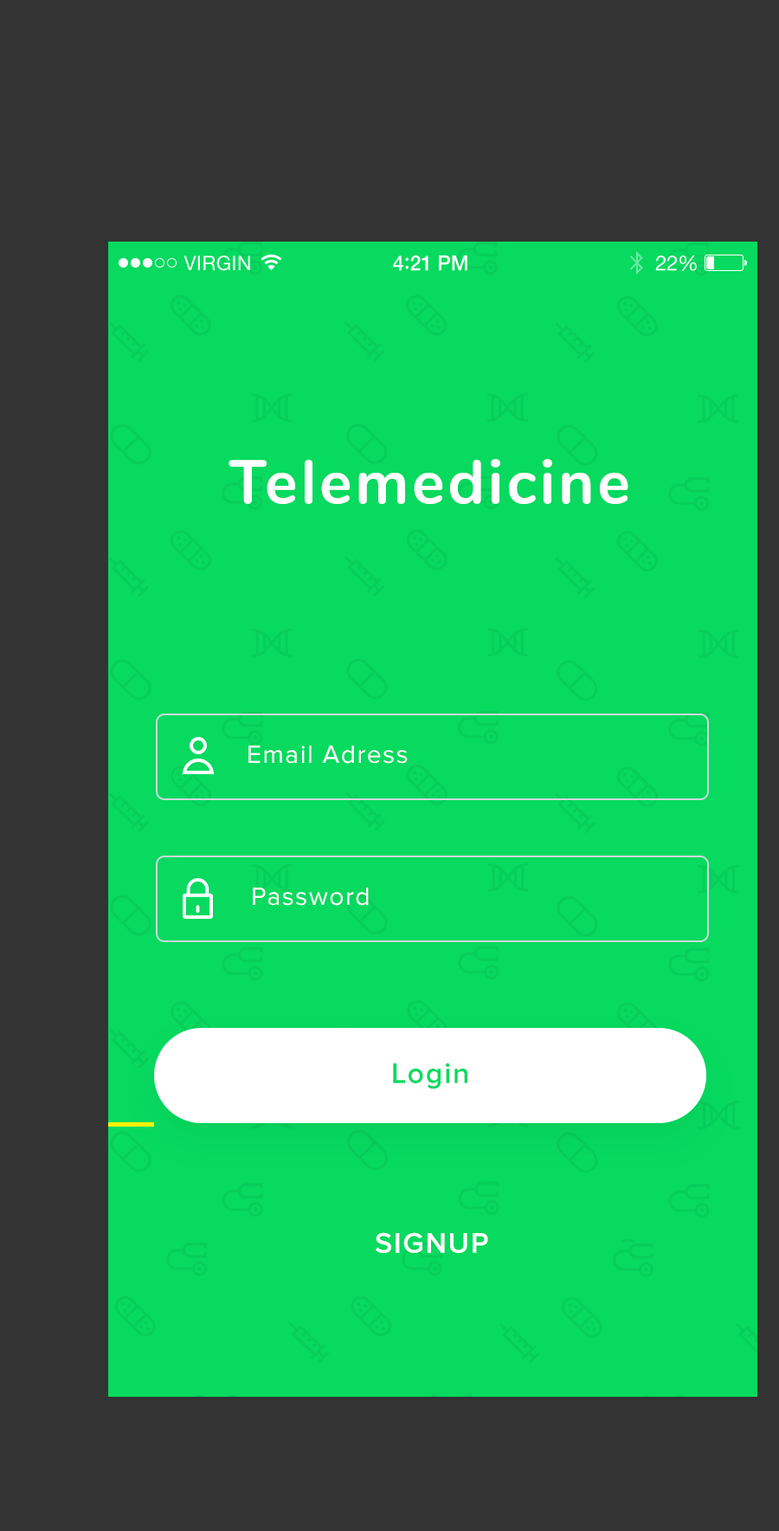
<style>
.page{position:relative;width:779px;height:1531px;background:#07da5f}
.page>*{position:absolute;margin:0}
.t1{font:61.6px "Nunito-Bold";letter-spacing:0.05em;color:#ffffff}
.t2{font:26px "ProximaNova-Regular";letter-spacing:0.05em;color:#ffffff}
.t3{font:29.4px "ProximaNova-Semibold";letter-spacing:0.05em;color:#07da5f}
.t4{font:29.4px "ProximaNova-Semibold";letter-spacing:0.05em;color:#ffffff}
</style>
<div class="page">
<p class="t1" style="left:229px;top:459px;width:399px;height:45px">Telemedicine</p>
<p class="t2" style="left:248px;top:745px;width:160px;height:19px">Email Adress</p>
<p class="t2" style="left:253px;top:887px;width:116px;height:18px">Password</p>
<p class="t3" style="left:393px;top:1062px;width:74px;height:27px">Login</p>
<p class="t4" style="left:376px;top:1232px;width:112px;height:21px">SIGNUP</p>
</div>
